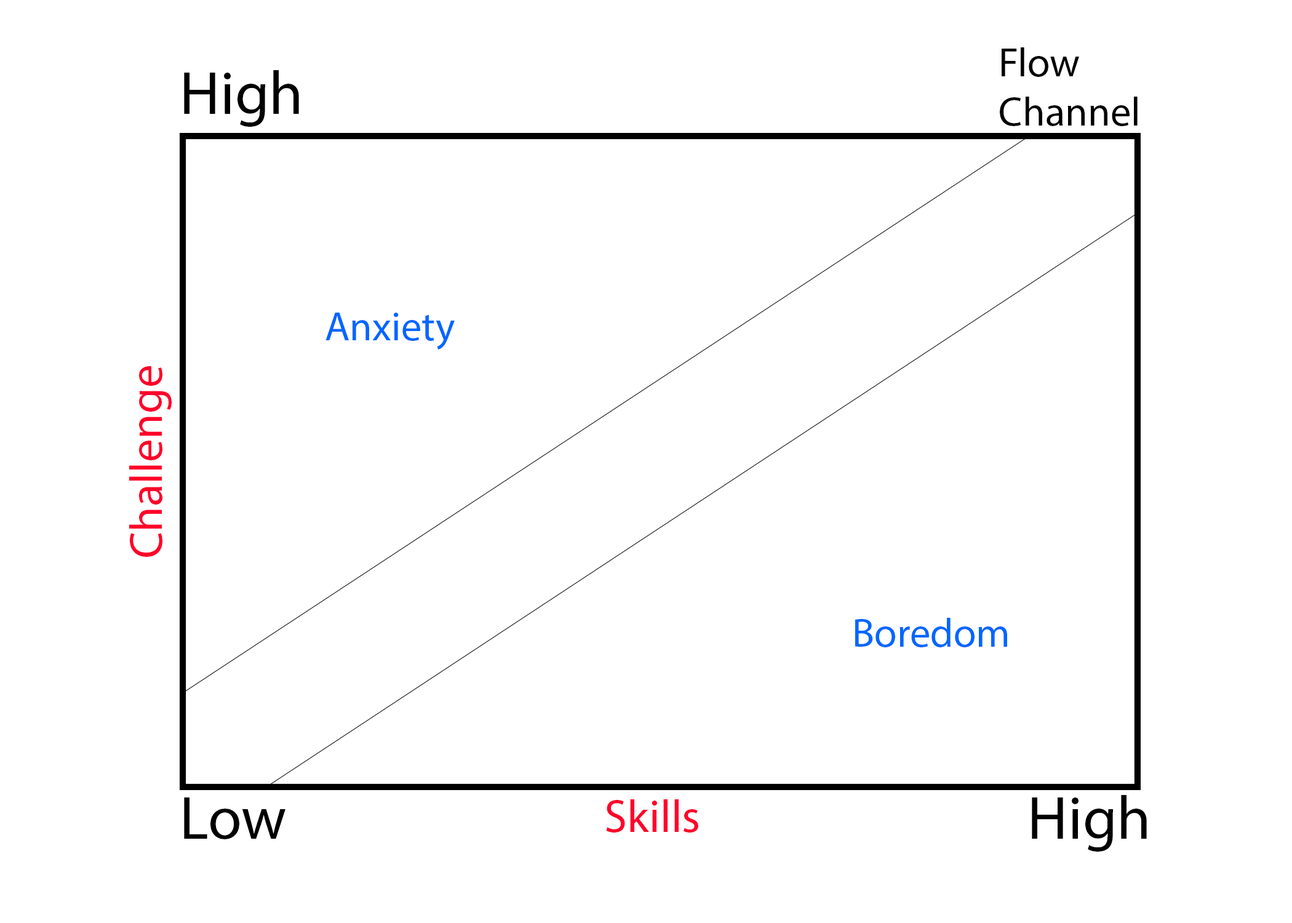
<style>
.page{position:relative;width:1292px;height:923px;background:#ffffff}
.page>*{position:absolute;margin:0}
.t1{font:41px "MyriadPro-Regular";color:#000000}
.t2{font:61.5px "MyriadPro-Regular";color:#000000}
.t3{font:41px "MyriadPro-Regular";color:#0066ff}
.t4{font:46.1px "MyriadPro-Regular";color:#ff002a}
</style>
<div class="page">
<p class="t1" style="left:1000px;top:47px;width:138px;height:79px">Flow <br>Channel</p>
<p class="t2" style="left:184px;top:70px;width:115px;height:57px">High</p>
<p class="t3" style="left:325px;top:313px;width:130px;height:36px">Anxiety</p>
<p class="t4" style="left:129px;top:366px;width:43px;height:191px;rotate:-90deg">Challenge</p>
<p class="t3" style="left:855px;top:618px;width:152px;height:29px">Boredom</p>
<p class="t2" style="left:184px;top:797px;width:101px;height:42px">Low</p>
<p class="t2" style="left:1032px;top:795px;width:115px;height:57px">High</p>
<p class="t4" style="left:606px;top:799px;width:92px;height:33px">Skills</p>
</div>
